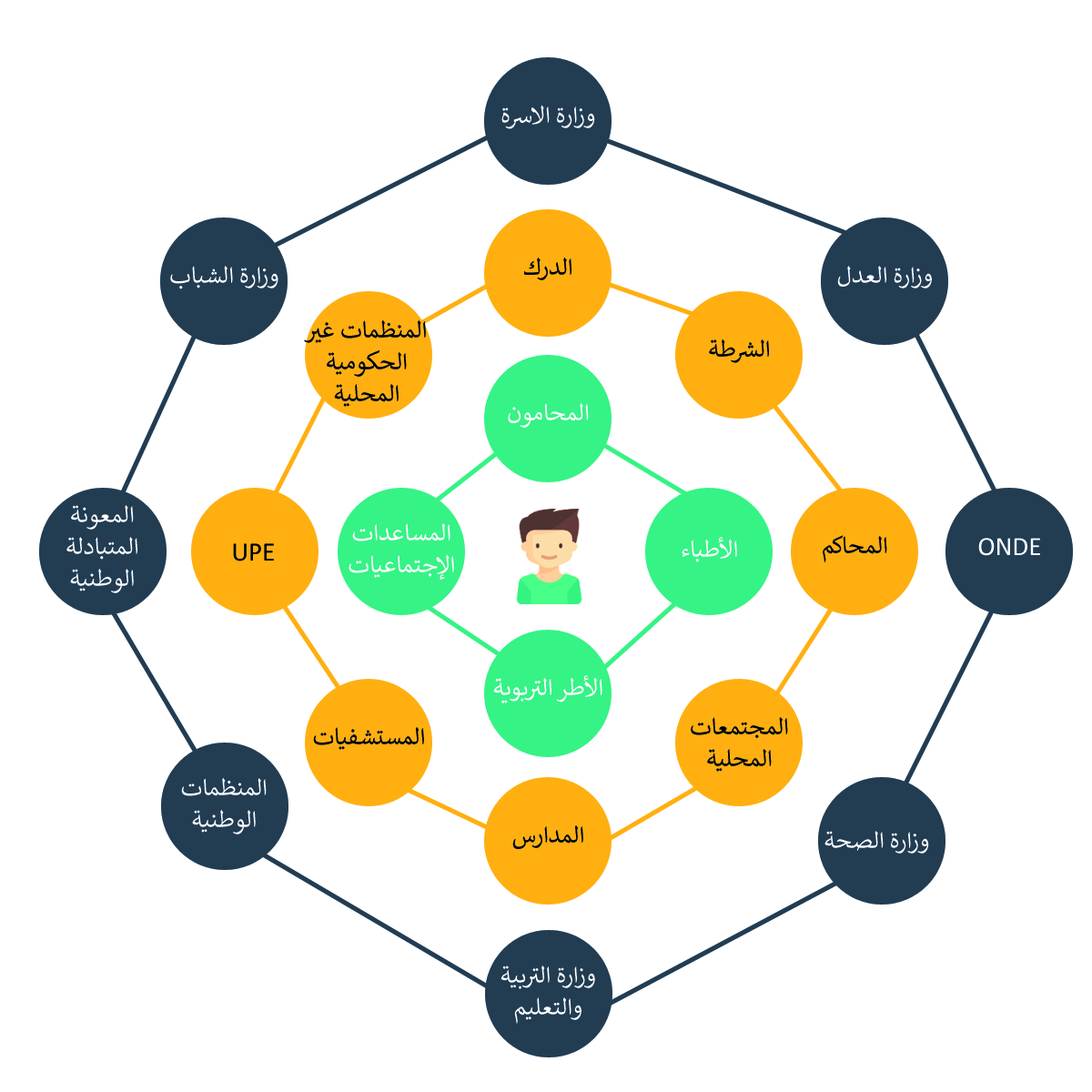
<style>
.page{position:relative;width:1092px;height:1092px;background:#ffffff}
.page>*{position:absolute;margin:0}
.t1{font:26.5px "Calibri";color:#ffffff}
.t2{font:26.5px "Calibri";color:#000000}
</style>
<div class="page">
<p class="t1" style="left:501px;top:105px;width:94px;height:24px">وزارة الاسرة</p>
<p class="t2" style="left:524px;top:258px;width:47px;height:22px">الدرك</p>
<p class="t1" style="left:170px;top:266px;width:108px;height:23px">وزارة الشباب</p>
<p class="t1" style="left:837px;top:266px;width:95px;height:22px">وزارة العدل</p>
<p class="t2" style="left:304px;top:319px;width:122px;height:88px;text-align:center">المنظمات غير الحكومية المحلية</p>
<p class="t2" style="left:709px;top:339px;width:60px;height:24px">الشرطة</p>
<p class="t1" style="left:508px;top:403px;width:81px;height:25px">المحامون</p>
<p class="t1" style="left:66px;top:505px;width:71px;height:88px;text-align:center">المعونة المتبادلة الوطنية</p>
<p class="t1" style="left:349px;top:523px;width:105px;height:58px;text-align:center">المساعدات الإجتماعيات</p>
<p class="t2" style="left:233px;top:543px;width:41px;height:18px">UPE</p>
<p class="t1" style="left:682px;top:537px;width:55px;height:25px">الأطباء</p>
<p class="t2" style="left:823px;top:535px;width:64px;height:27px">المحاكم</p>
<p class="t1" style="left:978px;top:538px;width:62px;height:18px">ONDE</p>
<p class="t1" style="left:493px;top:675px;width:109px;height:28px">الأطر التربوية</p>
<p class="t2" style="left:691px;top:717px;width:97px;height:55px;text-align:center">المجتمعات المحلية</p>
<p class="t2" style="left:313px;top:727px;width:111px;height:23px">المستشفيات</p>
<p class="t1" style="left:181px;top:777px;width:86px;height:57px;text-align:center">المنظمات الوطنية</p>
<p class="t2" style="left:512px;top:825px;width:71px;height:24px">المدارس</p>
<p class="t1" style="left:824px;top:831px;width:105px;height:23px">وزارة الصحة</p>
<p class="t1" style="left:500px;top:965px;width:95px;height:59px;text-align:center">وزارة التربية والتعليم</p>
</div>
